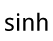
<style>
.page{position:relative;width:53px;height:41px;background:#ffffff}
.page>*{position:absolute;margin:0}
.t1{font:23.7px "DroidSans";color:#000000}
</style>
<div class="page">
<p class="t1" style="left:5px;top:12px;width:43px;height:19px">sinh</p>
</div>
